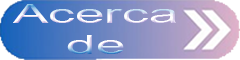
<style>
.page{position:relative;width:240px;height:60px}
.page>*{position:absolute;margin:0}
.t1{font:26.4px "ArialMT";scale:2 1}
</style>
<div class="page">
<p class="t1" style="left:13px;top:4px;width:163px;height:50px;text-align:center">Acerca<br>de</p>
</div>
